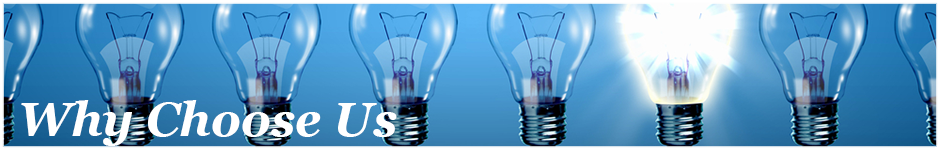
<style>
.page{position:relative;width:940px;height:150px}
.page>*{position:absolute;margin:0}
.t1{font:47px "Georgia-BoldItalic";color:#ffffff}
</style>
<div class="page">
<p class="t1" style="left:21px;top:100px;width:376px;height:46px">Why Choose Us</p>
</div>
